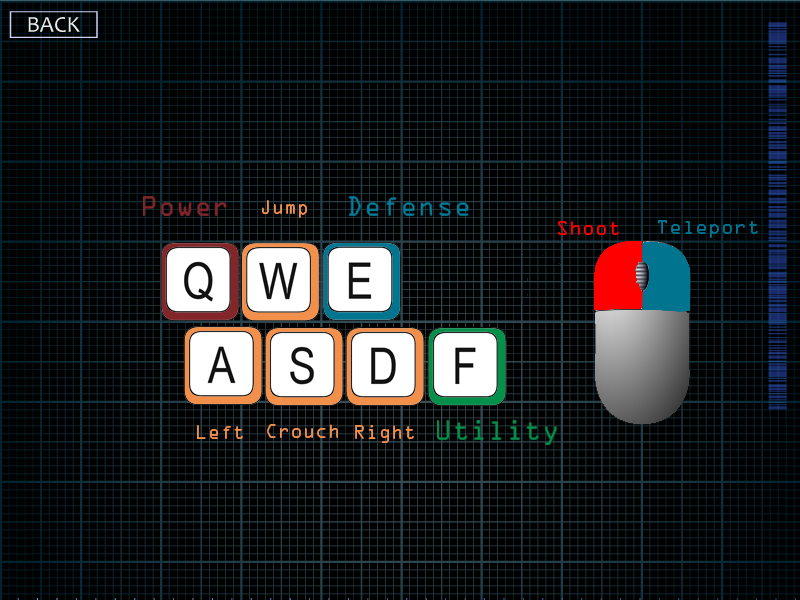
<style>
.page{position:relative;width:800px;height:600px;background:#000000}
.page>*{position:absolute;margin:0}
.t1{font:17.5px "OCRAStd";color:#f2904b}
.t2{font:18px "OCRAStd";color:#ff0000}
.t3{font:18px "OCRAStd";color:#017590}
</style>
<div class="page">
<p class="t1" style="left:262px;top:200px;width:45px;height:18px">Jump</p>
<p class="t2" style="left:558px;top:221px;width:61px;height:14px">Shoot</p>
<p class="t3" style="left:658px;top:220px;width:100px;height:18px">Teleport</p>
<p class="t1" style="left:197px;top:425px;width:46px;height:14px">Left</p>
<p class="t1" style="left:267px;top:424px;width:71px;height:14px">Crouch</p>
<p class="t1" style="left:355px;top:425px;width:59px;height:18px">Right</p>
</div>
